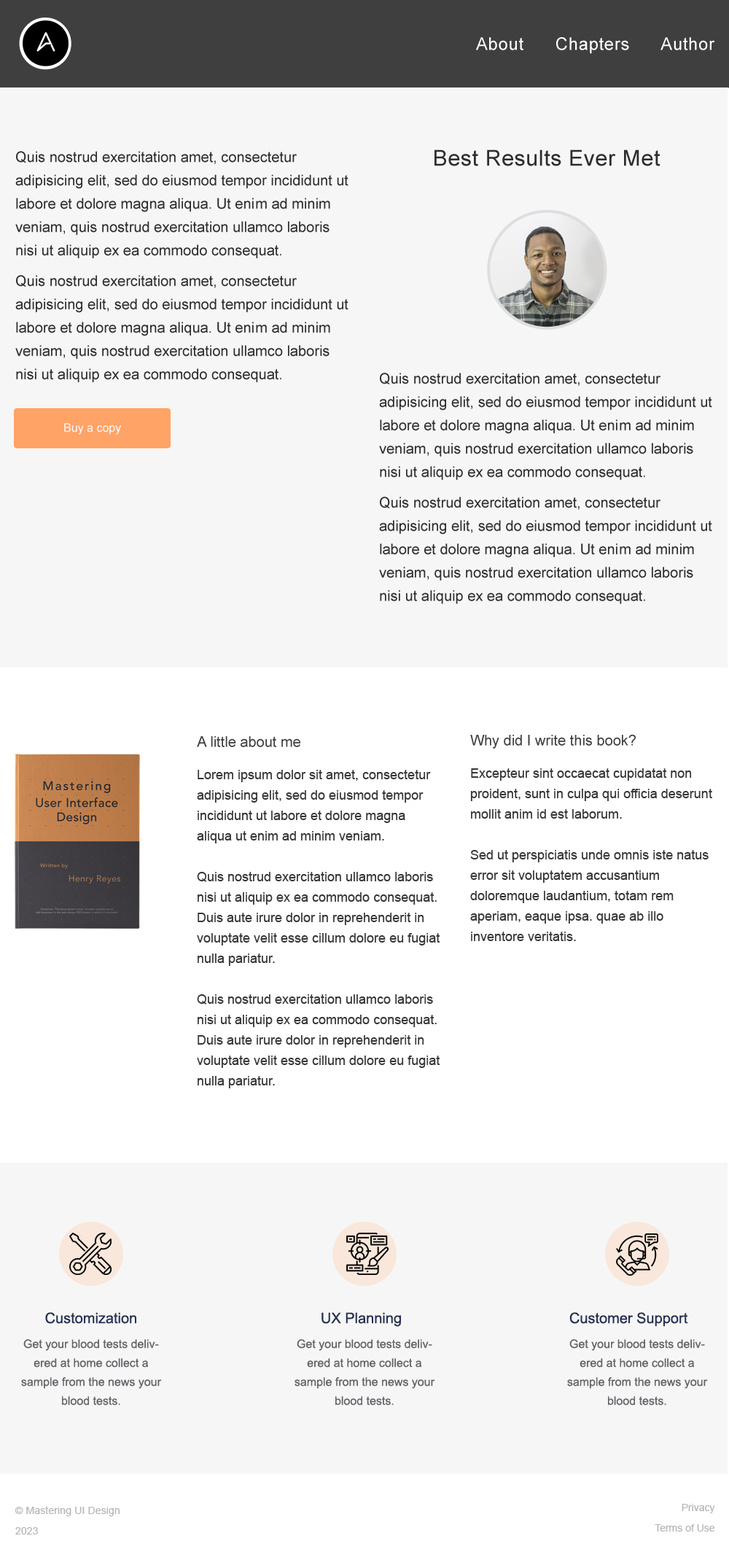
<style>
.page{position:relative;width:729px;height:1568px;background:#f6f6f6}
.page>*{position:absolute;margin:0}
.t1{font:17.5px "ArialMT";letter-spacing:0.025em;color:#ffffff}
.t2{font:21.9px "ArialMT";letter-spacing:0.025em;color:#2d2d2d}
.t3{font:14.6px/23.3px "ArialMT";color:#2d2d2d}
.t4{font:11.7px "ArialMT";color:#f7f7f7}
.t5{font:14.6px "ArialMT";color:#403f3f}
.t6{font:13.1px/20.4px "ArialMT";color:#373737}
.t7{font:14.6px "ArialMT";color:#242f51}
.t8{font:11.7px/19px "ArialMT";color:#616368}
.t9{font:10.2px/20.4px "ArialMT";color:#b5b5b5}
.t10{font:10.2px/20.4px "ArialMT";letter-spacing:0.01em;color:#b5b5b5}
</style>
<div class="page">
<p class="t1" style="left:476px;top:37px;width:239px;height:17px">About      Chapters      Author</p>
<p class="t2" style="left:434px;top:149px;width:226px;height:17px">Best Results Ever Met</p>
<p class="t3" style="left:15px;top:151px;width:333px;height:232px">Quis nostrud exercitation amet, consectetur adipisicing elit, sed do eiusmod tempor incididunt ut labore et dolore magna aliqua. Ut enim ad minim veniam, quis nostrud exercitation ullamco laboris nisi ut aliquip ex ea commodo consequat.<br>Quis nostrud exercitation amet, consectetur adipisicing elit, sed do eiusmod tempor incididunt ut labore et dolore magna aliqua. Ut enim ad minim veniam, quis nostrud exercitation ullamco laboris nisi ut aliquip ex ea commodo consequat.</p>
<p class="t3" style="left:379px;top:373px;width:333px;height:231px">Quis nostrud exercitation amet, consectetur adipisicing elit, sed do eiusmod tempor incididunt ut labore et dolore magna aliqua. Ut enim ad minim veniam, quis nostrud exercitation ullamco laboris nisi ut aliquip ex ea commodo consequat.<br>Quis nostrud exercitation amet, consectetur adipisicing elit, sed do eiusmod tempor incididunt ut labore et dolore magna aliqua. Ut enim ad minim veniam, quis nostrud exercitation ullamco laboris nisi ut aliquip ex ea commodo consequat.</p>
<p class="t4" style="left:64px;top:423px;width:57px;height:11px">Buy a copy</p>
<p class="t5" style="left:197px;top:736px;width:103px;height:11px">A little about me</p>
<p class="t5" style="left:470px;top:734px;width:166px;height:15px">Why did I write this book?</p>
<p class="t6" style="left:197px;top:770px;width:243px;height:318px">Lorem ipsum dolor sit amet, consectetur adipisicing elit, sed do eiusmod tempor incididunt ut labore et dolore magna aliqua ut enim ad minim veniam. <br><br>Quis nostrud exercitation ullamco laboris nisi ut aliquip ex ea commodo consequat. Duis aute irure dolor in reprehenderit in voluptate velit esse cillum dolore eu fugiat nulla pariatur.<br><br>Quis nostrud exercitation ullamco laboris nisi ut aliquip ex ea commodo consequat. Duis aute irure dolor in reprehenderit in voluptate velit esse cillum dolore eu fugiat nulla pariatur.</p>
<p class="t6" style="left:470px;top:768px;width:242px;height:173px">Excepteur sint occaecat cupidatat non proident, sunt in culpa qui officia deserunt mollit anim id est laborum. <br><br>Sed ut perspiciatis unde omnis iste natus error sit voluptatem accusantium doloremque laudantium, totam rem aperiam, eaque ipsa. quae ab illo inventore veritatis.</p>
<p class="t7" style="left:45px;top:1312px;width:91px;height:12px">Customization</p>
<p class="t7" style="left:321px;top:1312px;width:80px;height:15px">UX Planning</p>
<p class="t7" style="left:569px;top:1312px;width:119px;height:15px">Customer Support</p>
<p class="t8" style="left:21px;top:1339px;width:141px;height:66px;text-align:center">Get your blood tests delivered at home collect a sample from the news your blood tests.</p>
<p class="t8" style="left:295px;top:1339px;width:140px;height:66px;text-align:center">Get your blood tests delivered at home collect a sample from the news your blood tests.</p>
<p class="t8" style="left:567px;top:1339px;width:141px;height:66px;text-align:center">Get your blood tests delivered at home collect a sample from the news your blood tests.</p>
<p class="t9" style="left:655px;top:1504px;width:60px;height:28px;text-align:right">Privacy<br>Terms of Use</p>
<p class="t10" style="left:15px;top:1506px;width:105px;height:28px">© Mastering UI Design<br>2023</p>
</div>
